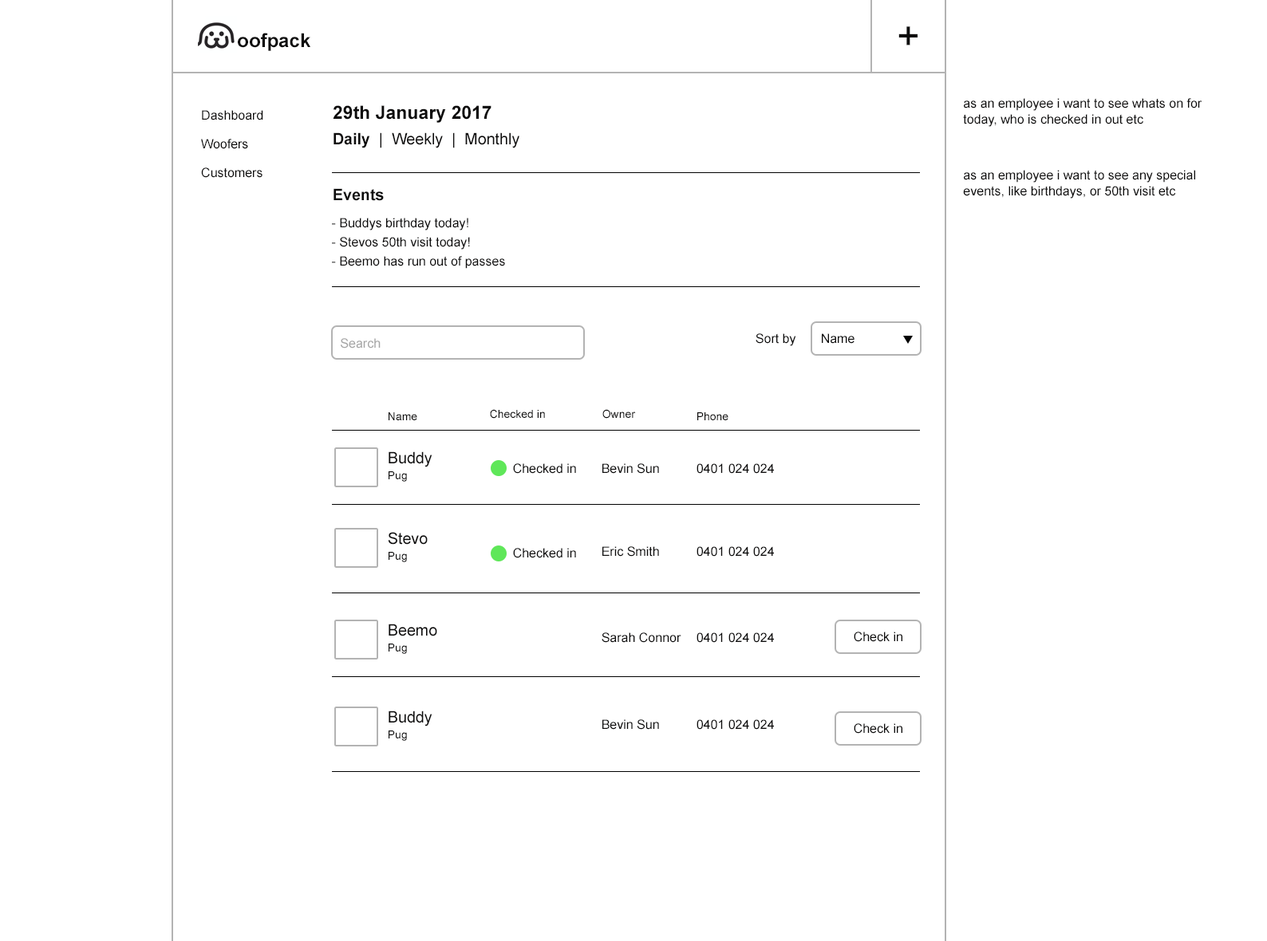
<style>
.page{position:relative;width:1267px;height:941px;background:#ffffff}
.page>*{position:absolute;margin:0}
.t1{font:39px "ArialMT";color:#0c0b0b}
.t2{font:19.1px "Arial-BoldMT";color:#0c0b0b}
.t3{font:12.8px/16px "ArialMT";color:#0c0b0b}
.t4{font:12.8px/28.7px "ArialMT";color:#0c0b0b}
.t5{font:18.4px "Arial-BoldMT";color:#0c0b0b}
.t6{font:15.7px "ArialMT";color:#0c0b0b}
.t7{font:15.7px "Arial-BoldMT";color:#0c0b0b}
.t8{font:12.8px/19.1px "ArialMT";color:#0c0b0b}
.t9{font:12.8px "ArialMT";color:#a5a5a5}
.t10{font:12.8px "ArialMT";color:#0c0b0b}
.t11{font:11.2px "ArialMT";color:#0c0b0b}
</style>
<div class="page">
<p class="t1" style="left:898px;top:26px;width:19px;height:19px">+</p>
<p class="t2" style="left:238px;top:33px;width:72px;height:18px">oofpack</p>
<p class="t3" style="left:963px;top:98px;width:239px;height:29px">as an employee i want to see whats on for today, who is checked in out etc</p>
<p class="t4" style="left:201px;top:110px;width:62px;height:68px">Dashboard<br>Woofers<br>Customers</p>
<p class="t5" style="left:333px;top:105px;width:158px;height:18px">29th January 2017</p>
<p class="t6" style="left:333px;top:132px;width:186px;height:16px"><span class="t7">Daily </span> |  Weekly  |  Monthly</p>
<p class="t3" style="left:963px;top:170px;width:232px;height:29px">as an employee i want to see any special events, like birthdays, or 50th visit etc</p>
<p class="t7" style="left:333px;top:188px;width:51px;height:13px">Events</p>
<p class="t8" style="left:332px;top:218px;width:173px;height:51px">- Buddys birthday today!<br>- Stevos 50th visit today!<br>- Beemo has run out of passes</p>
<p class="t9" style="left:341px;top:338px;width:40px;height:11px">Search</p>
<p class="t10" style="left:755px;top:333px;width:41px;height:13px">Sort by</p>
<p class="t10" style="left:822px;top:333px;width:32px;height:11px">Name</p>
<p class="t11" style="left:388px;top:412px;width:29px;height:8px">Name</p>
<p class="t11" style="left:490px;top:409px;width:55px;height:10px">Checked in</p>
<p class="t11" style="left:602px;top:409px;width:34px;height:10px">Owner</p>
<p class="t11" style="left:697px;top:412px;width:31px;height:8px">Phone</p>
<p class="t6" style="left:388px;top:452px;width:44px;height:15px">Buddy</p>
<p class="t11" style="left:388px;top:471px;width:19px;height:11px">Pug</p>
<p class="t10" style="left:513px;top:463px;width:63px;height:11px">Checked in</p>
<p class="t10" style="left:602px;top:463px;width:57px;height:11px">Bevin Sun</p>
<p class="t10" style="left:696px;top:463px;width:78px;height:11px">0401 024 024</p>
<p class="t6" style="left:388px;top:532px;width:40px;height:13px">Stevo</p>
<p class="t11" style="left:388px;top:552px;width:19px;height:10px">Pug</p>
<p class="t10" style="left:513px;top:548px;width:63px;height:10px">Checked in</p>
<p class="t10" style="left:602px;top:546px;width:57px;height:11px">Eric Smith</p>
<p class="t10" style="left:696px;top:546px;width:78px;height:11px">0401 024 024</p>
<p class="t6" style="left:388px;top:624px;width:49px;height:13px">Beemo</p>
<p class="t10" style="left:601px;top:633px;width:80px;height:10px">Sarah Connor</p>
<p class="t10" style="left:696px;top:633px;width:78px;height:10px">0401 024 024</p>
<p class="t10" style="left:854px;top:632px;width:48px;height:10px">Check in</p>
<p class="t11" style="left:388px;top:644px;width:19px;height:10px">Pug</p>
<p class="t6" style="left:388px;top:711px;width:44px;height:16px">Buddy</p>
<p class="t10" style="left:602px;top:720px;width:57px;height:10px">Bevin Sun</p>
<p class="t10" style="left:696px;top:720px;width:78px;height:10px">0401 024 024</p>
<p class="t10" style="left:854px;top:724px;width:48px;height:10px">Check in</p>
<p class="t11" style="left:388px;top:731px;width:19px;height:10px">Pug</p>
</div>
